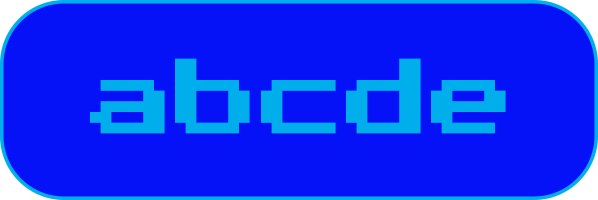
<style>
.page{position:relative;width:598px;height:200px;background:#0511f7}
.page>*{position:absolute;margin:0}
.t1{font:85.3px "PressStart2P-Regular";color:#00afec}
</style>
<div class="page">
<p class="t1" style="left:90px;top:58px;width:416px;height:76px">abcde</p>
</div>
